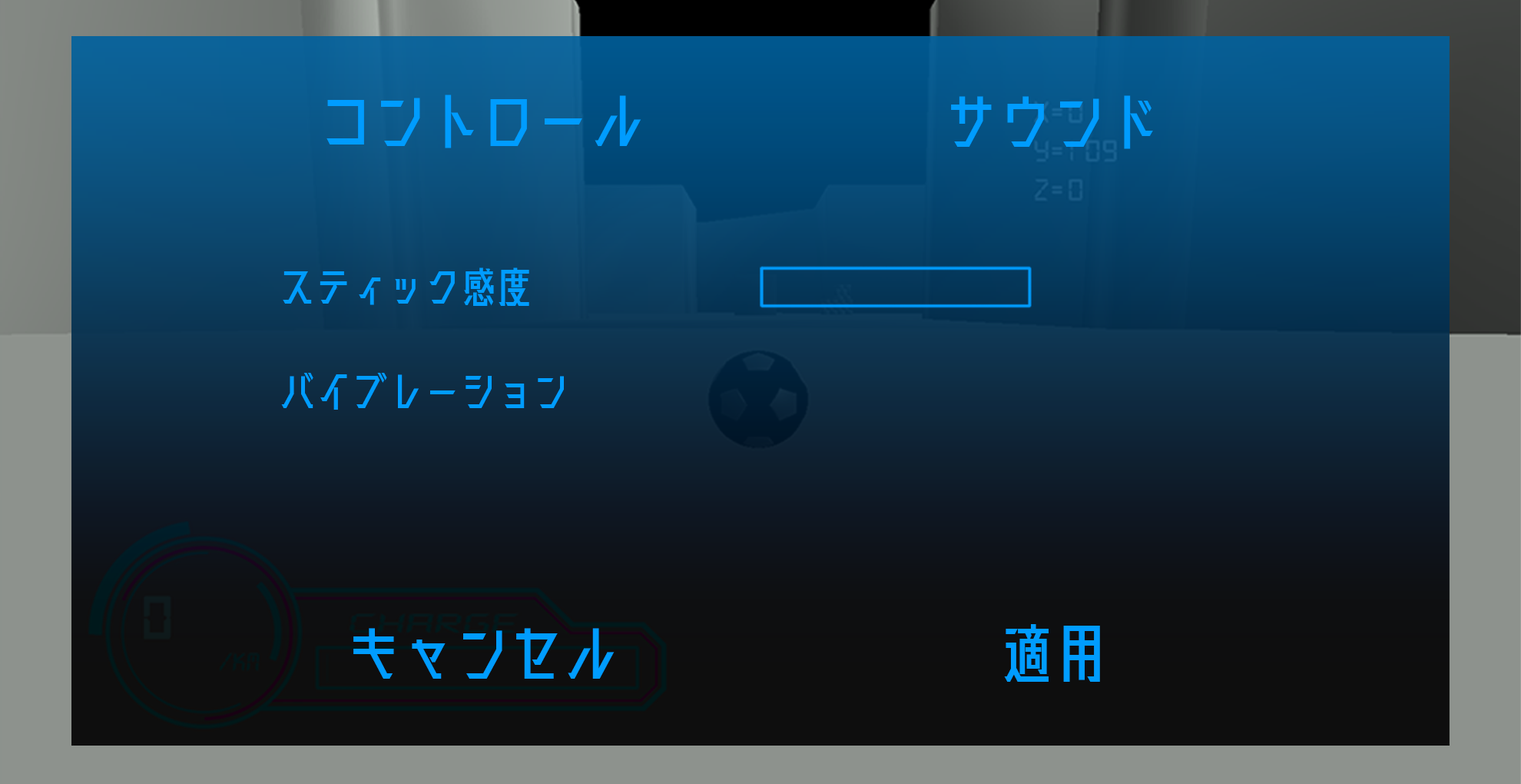
<style>
.page{position:relative;width:1521px;height:784px}
.page>*{position:absolute;margin:0}
.t1{font:69.6px "Kaisotai-Next-UP-B";letter-spacing:-0.02em;color:#009cff}
.t2{font:46.4px "Kaisotai-Next-UP-B";letter-spacing:-0.02em;color:#009cff}
</style>
<div class="page">
<p class="t1" style="left:327px;top:95px;width:315px;height:53px">コントロール</p>
<p class="t1" style="left:951px;top:95px;width:202px;height:54px">サウンド</p>
<p class="t2" style="left:283px;top:267px;width:246px;height:39px">スティック感度</p>
<p class="t2" style="left:281px;top:373px;width:283px;height:37px">バイブレーション</p>
<p class="t1" style="left:353px;top:628px;width:262px;height:50px">キャンセル</p>
<p class="t1" style="left:1004px;top:624px;width:96px;height:58px">適用</p>
</div>
